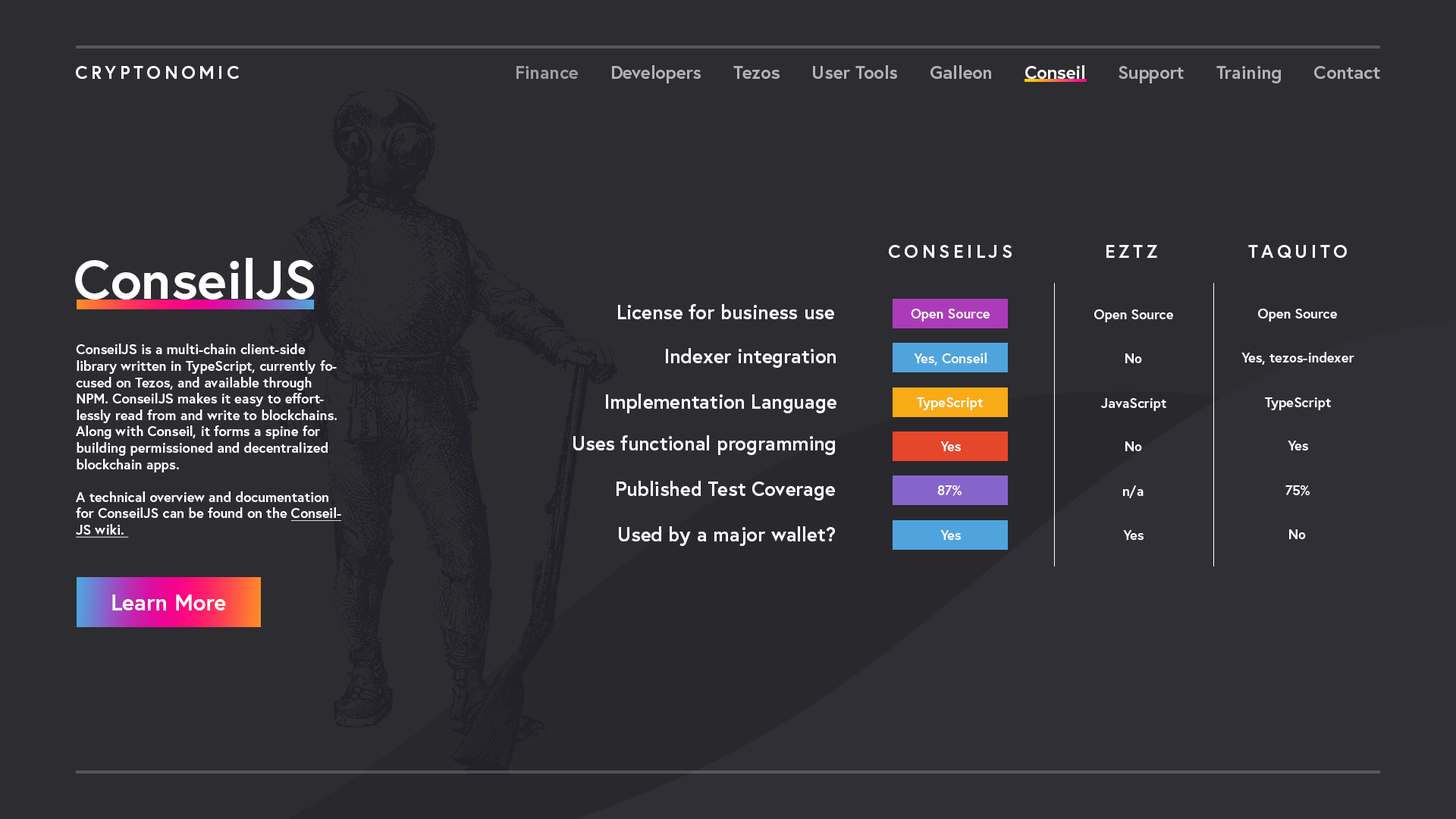
<style>
.page{position:relative;width:1456px;height:819px;background:#2d2c31}
.page>*{position:absolute;margin:0}
.t1{font:18.2px "Europa-Bold";letter-spacing:0.2em;color:#ffffff;text-transform:uppercase}
.t2{font:18.2px "Europa-Bold";color:#b2b2b2}
.t3{font:18.2px "Europa-Bold";color:#9e9e9f}
.t4{font:18.2px "Europa-Bold";color:#ffffff}
.t5{font:54.6px "Europa-Bold";color:#ffffff}
.t6{font:19.7px "Europa-Bold";color:#ffffff}
.t7{font:13.6px "Europa-Bold";color:#ffffff}
.t8{font:13.6px "Europa-Bold";color:#ffffff;text-decoration:underline}
.t9{font:22.7px "Europa-Bold";color:#ffffff}
</style>
<div class="page">
<p class="t1" style="left:76px;top:66px;width:163px;height:13px">CryptoNOMIC</p>
<p class="t2" style="left:516px;top:65px;width:864px;height:18px"><span class="t3">Finance      </span>Developers      Tezos      User Tools      Galleon      <span class="t4">Conseil      </span>Support      Training      Contact</p>
<p class="t1" style="left:889px;top:245px;width:123px;height:13px">CONSEILJS</p>
<p class="t1" style="left:1106px;top:245px;width:51px;height:13px">EZTZ</p>
<p class="t1" style="left:1248px;top:245px;width:99px;height:14px">TAQUITO</p>
<p class="t5" style="left:75px;top:258px;width:239px;height:42px">ConseilJS</p>
<p class="t6" style="left:618px;top:304px;width:216px;height:15px">License for business use</p>
<p class="t7" style="left:911px;top:309px;width:79px;height:13px">Open Source</p>
<p class="t7" style="left:1094px;top:309px;width:79px;height:13px">Open Source</p>
<p class="t7" style="left:1258px;top:309px;width:79px;height:13px">Open Source</p>
<p class="t7" style="left:76px;top:344px;width:266px;height:194px">ConseilJS is a multi-chain client-side library written in TypeScript, currently focused on Tezos, and available through NPM. ConseilJS makes it easy to effortlessly read from and write to blockchains. Along with Conseil, it forms a spine for building permissioned and decentralized blockchain apps. <br><br>A technical overview and documentation for ConseilJS can be found on the <span class="t8">ConseilJS wiki.</span></p>
<p class="t6" style="left:666px;top:348px;width:170px;height:20px">Indexer integration</p>
<p class="t7" style="left:914px;top:353px;width:73px;height:13px">Yes, Conseil</p>
<p class="t7" style="left:1125px;top:353px;width:17px;height:10px">No</p>
<p class="t7" style="left:1241px;top:352px;width:113px;height:13px">Yes, tezos-indexer</p>
<p class="t6" style="left:606px;top:394px;width:230px;height:19px">Implementation Language</p>
<p class="t7" style="left:917px;top:397px;width:66px;height:13px">TypeScript</p>
<p class="t7" style="left:1101px;top:398px;width:65px;height:13px">JavaScript</p>
<p class="t7" style="left:1265px;top:397px;width:66px;height:13px">TypeScript</p>
<p class="t6" style="left:573px;top:435px;width:262px;height:20px">Uses functional programming</p>
<p class="t7" style="left:940px;top:441px;width:21px;height:10px">Yes</p>
<p class="t7" style="left:1125px;top:441px;width:17px;height:10px">No</p>
<p class="t7" style="left:1288px;top:441px;width:20px;height:9px">Yes</p>
<p class="t6" style="left:617px;top:481px;width:218px;height:19px">Published Test Coverage</p>
<p class="t7" style="left:937px;top:485px;width:25px;height:11px">87%</p>
<p class="t7" style="left:1123px;top:485px;width:21px;height:13px">n/a</p>
<p class="t7" style="left:1285px;top:485px;width:25px;height:11px">75%</p>
<p class="t6" style="left:619px;top:526px;width:216px;height:20px">Used by a major wallet?</p>
<p class="t7" style="left:940px;top:530px;width:21px;height:10px">Yes</p>
<p class="t7" style="left:1123px;top:530px;width:21px;height:10px">Yes</p>
<p class="t7" style="left:1289px;top:529px;width:17px;height:10px">No</p>
<p class="t9" style="left:112px;top:595px;width:114px;height:15px">Learn More</p>
</div>
